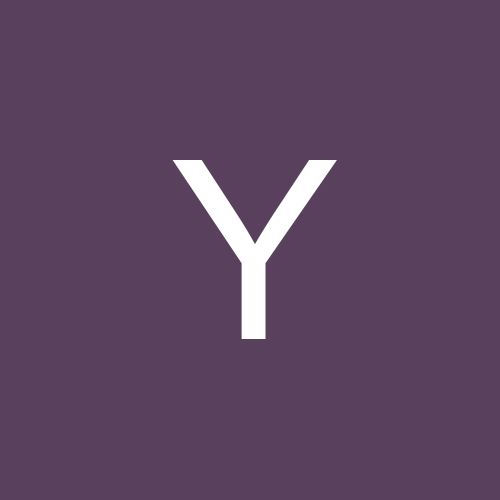
<style>
.page{position:relative;width:500px;height:500px;background:#59405c}
.page>*{position:absolute;margin:0}
.t1{font:250px "ArialMT";color:#ffffff}
</style>
<div class="page">
<p class="t1" style="left:172px;top:160px;width:165px;height:179px">Y</p>
</div>
